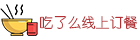
<style>
.page{position:relative;width:140px;height:40px;background:#ffffff}
.page>*{position:absolute;margin:0}
.t1{font:14px "YouYuan"}
</style>
<div class="page">
<p class="t1" style="left:40px;top:15px;width:98px;height:15px">吃了么线上订餐</p>
</div>
